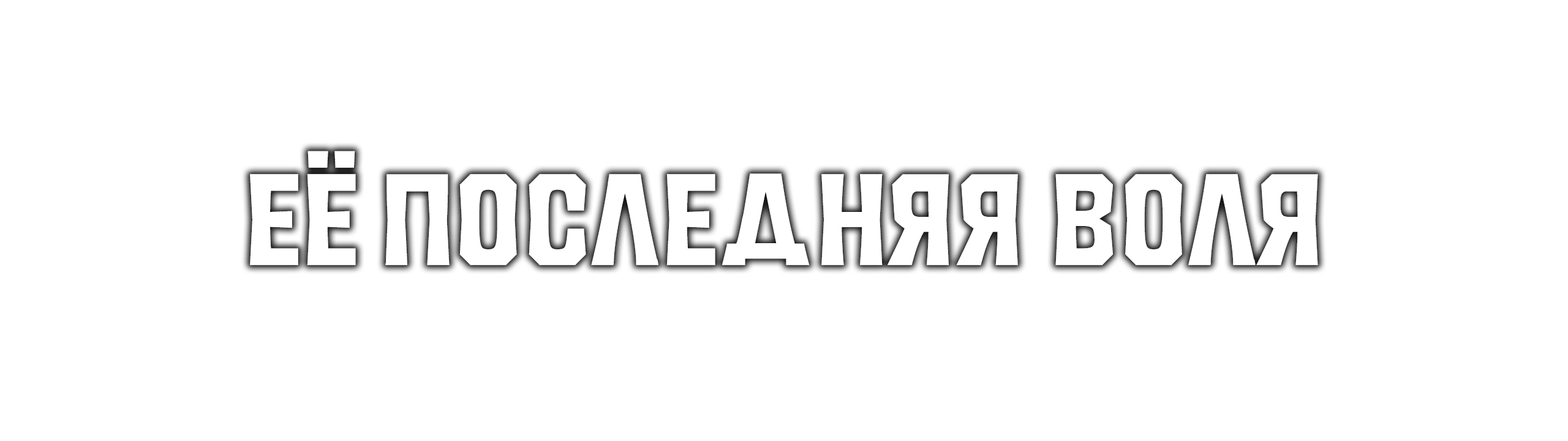
<style>
.page{position:relative;width:1568px;height:441px;background:#ffffff}
.page>*{position:absolute;margin:0}
.t1{font:129.8px "KingWoodUnicaseBold-";letter-spacing:-0.015em;color:#ffffff}
</style>
<div class="page">
<p class="t1" style="left:250px;top:151px;width:1068px;height:114px">ЕЁ ПОСЛЕДНЯЯ ВОЛЯ</p>
</div>
